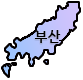
<style>
.page{position:relative;width:83px;height:80px;background:#ffffff}
.page>*{position:absolute;margin:0}
.t1{font:14px "HancomGothicBold";color:#000000}
</style>
<div class="page">
<p class="t1" style="left:34px;top:30px;width:27px;height:13px">부산</p>
</div>
